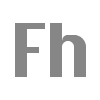
<style>
.page{position:relative;width:100px;height:100px;background:#ffffff}
.page>*{position:absolute;margin:0}
.t1{font:72px "Krungthep";letter-spacing:-0.1em;color:#868686}
</style>
<div class="page">
<p class="t1" style="left:15px;top:23px;width:71px;height:54px">Fh</p>
</div>
